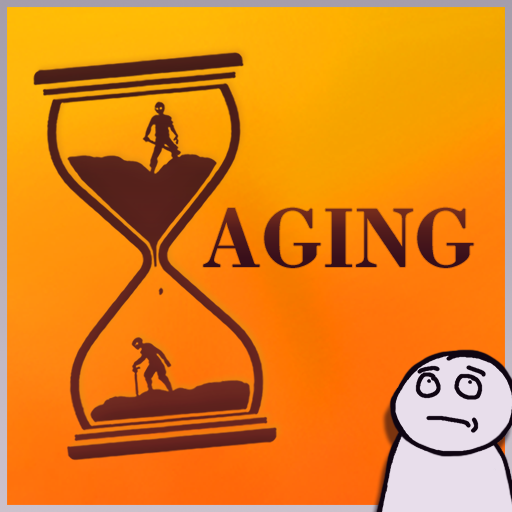
<style>
.page{position:relative;width:512px;height:512px}
.page>*{position:absolute;margin:0}
.t1{font:80.8px "EssonnesText-Bold";letter-spacing:0.01em;color:#48171b}
</style>
<div class="page">
<p class="t1" style="left:203px;top:207px;width:271px;height:61px">AGING</p>
</div>
